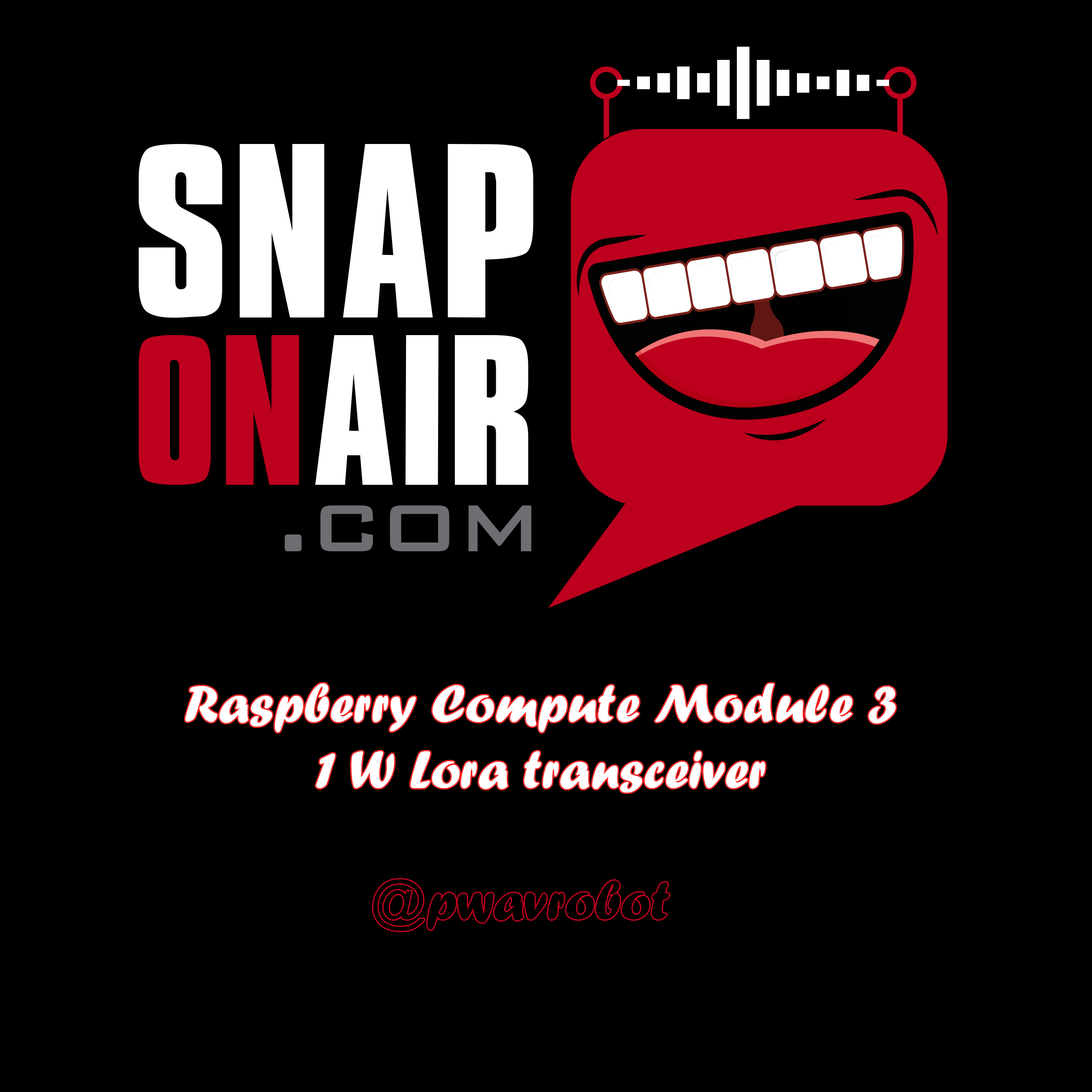
<style>
.page{position:relative;width:1092px;height:1092px;background:#000000}
.page>*{position:absolute;margin:0}
.t1{font:55px "ForteMT";color:#ffffff}
</style>
<div class="page">
<p class="t1" style="left:185px;top:683px;width:711px;height:110px;text-align:center">Raspberry Compute Module 3<br>1 W Lora transceiver</p>
</div>
